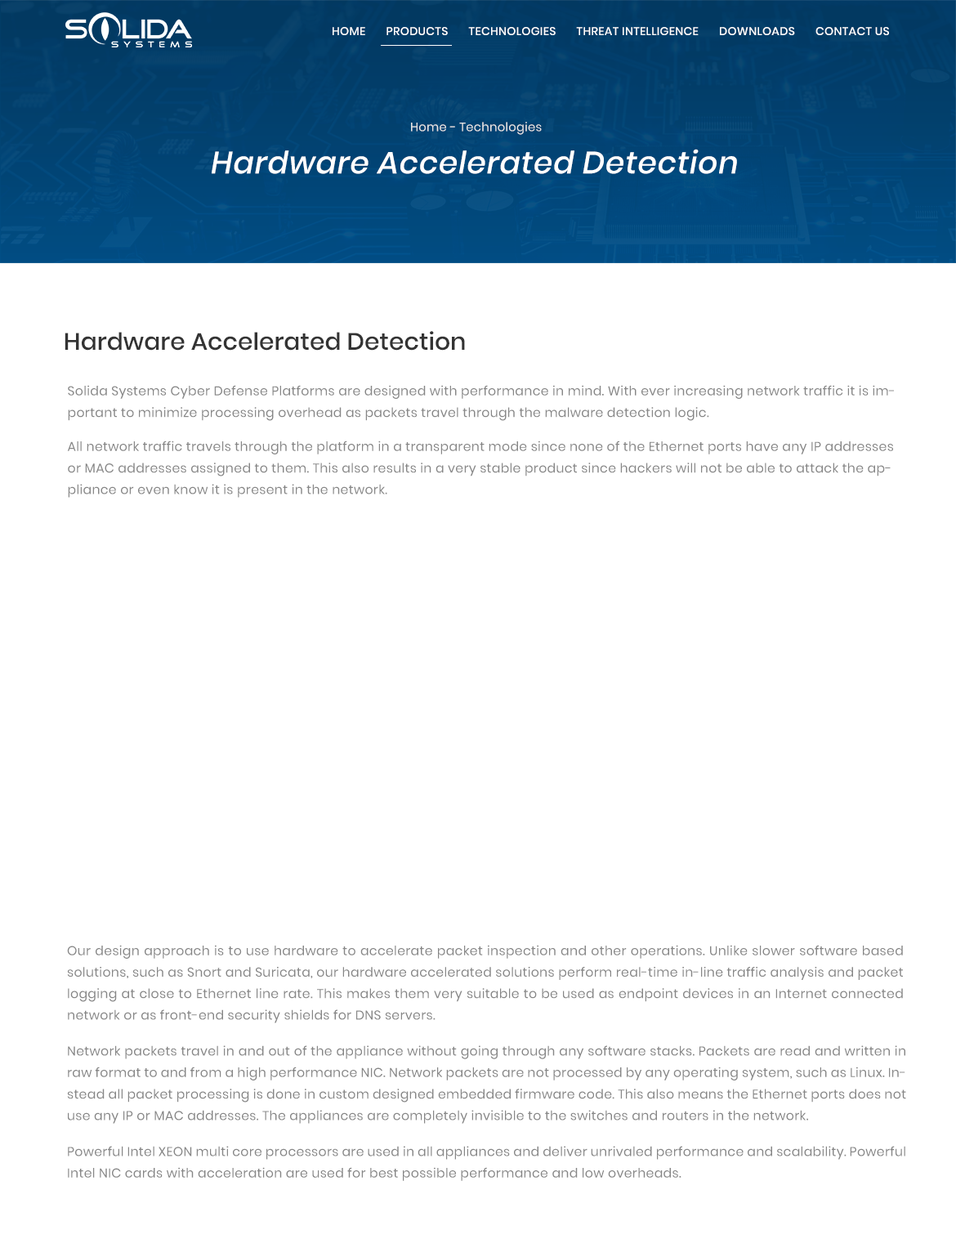
<style>
.page{position:relative;width:956px;height:1248px;background:#ffffff}
.page>*{position:absolute;margin:0}
.t1{font:11.4px "Poppins-Medium";letter-spacing:0.02em;color:#ffffff;text-transform:uppercase}
.t2{font:12px "Poppins-Regular";letter-spacing:0.02em;color:#e7e6e6}
.t3{font:30.9px "Poppins-Medium";letter-spacing:0.02em;color:#ffffff;font-style:italic}
.t4{font:23.9px "Poppins-Medium";color:#333333}
.t5{font:12.9px/21.5px "Poppins-Regular";letter-spacing:0.02em;color:#868686}
.t6{font:12.8px/21.5px "Poppins-Regular";letter-spacing:0.02em;color:#868686}
</style>
<div class="page">
<p class="t1" style="left:333px;top:27px;width:556px;height:8px">HOME       PRODUCTS       TECHNOLOGIES       THREAT INTELLIGENCE       DOWNLOADS       CONTACT US</p>
<p class="t2" style="left:411px;top:122px;width:131px;height:13px">Home - Technologies</p>
<p class="t3" style="left:212px;top:149px;width:525px;height:25px">Hardware Accelerated Detection</p>
<p class="t4" style="left:65px;top:331px;width:400px;height:19px">Hardware Accelerated Detection</p>
<p class="t5" style="left:68px;top:385px;width:826px;height:36px">Solida Systems Cyber Defense Platforms are designed with performance in mind. With ever increasing network traffic it is important to minimize processing overhead as packets travel through the malware detection logic.</p>
<p class="t5" style="left:67px;top:440px;width:826px;height:58px">All network traffic travels through the platform in a transparent mode since none of the Ethernet ports have any IP addresses or MAC addresses assigned to them. This also results in a very stable product since hackers will not be able to attack the appliance or even know it is present in the network.</p>
<p class="t6" style="left:67px;top:944px;width:836px;height:79px;text-align:justify">Our design approach is to use hardware to accelerate packet inspection and other operations. Unlike slower software based solutions, such as Snort and Suricata, our hardware accelerated solutions perform real-time in-line traffic analysis and packet logging at close to Ethernet line rate. This makes them very suitable to be used as endpoint devices in an Internet connected network or as front-end security shields for DNS servers.</p>
<p class="t6" style="left:67px;top:1045px;width:839px;height:78px;text-align:justify">Network packets travel in and out of the appliance without going through any software stacks. Packets are read and written in raw format to and from a high performance NIC. Network packets are not processed by any operating system, such as Linux. Instead all packet processing is done in custom designed embedded firmware code. This also means the Ethernet ports does not use any IP or MAC addresses. The appliances are completely invisible to the switches and routers in the network.</p>
<p class="t6" style="left:68px;top:1145px;width:837px;height:36px;text-align:justify">Powerful Intel XEON multi core processors are used in all appliances and deliver unrivaled performance and scalability. Powerful Intel NIC cards with acceleration are used for best possible performance and low overheads.</p>
</div>
